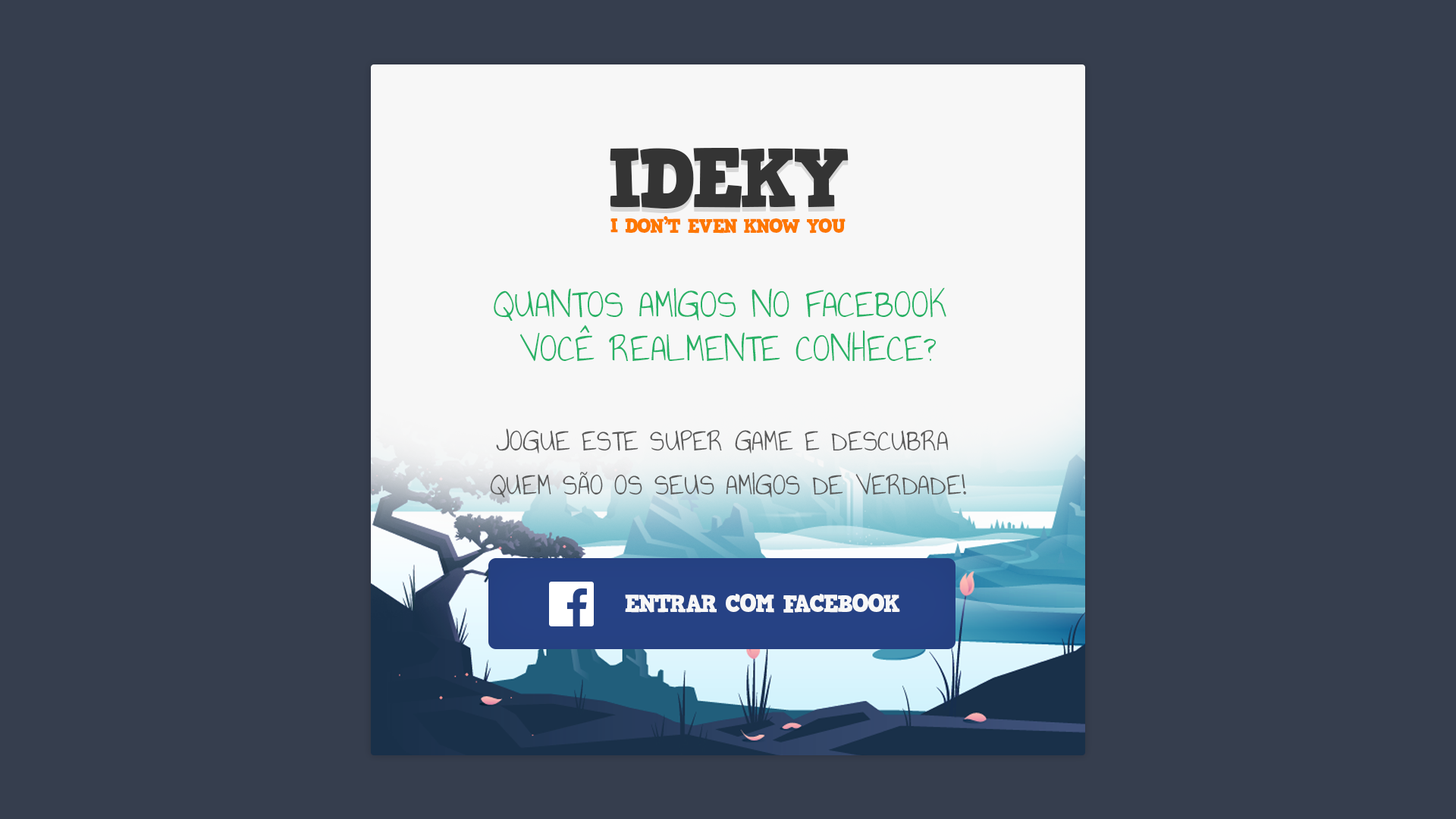
<style>
.page{position:relative;width:1456px;height:819px;background:#363e4e}
.page>*{position:absolute;margin:0}
.t1{font:83.2px "HVDComicSerifPro";letter-spacing:-0.06em;color:#343434;text-transform:uppercase}
.t2{font:19.5px "HVDComicSerifPro";letter-spacing:-0.06em;color:#fd7700;text-transform:uppercase}
.t3{font:30.8px/44.5px "AnnieUseYourTelescope";color:#585858;text-transform:uppercase}
.t4{font:40.5px/44.5px "AnnieUseYourTelescope";color:#28b266;text-transform:uppercase}
.t5{font:24.3px "HVDComicSerifPro";letter-spacing:-0.06em;color:#f7f7f7;text-transform:uppercase}
</style>
<div class="page">
<p class="t1" style="left:610px;top:148px;width:239px;height:61px">ideky</p>
<p class="t2" style="left:610px;top:216px;width:236px;height:18px">I don’t even know you</p>
<p class="t3" style="left:490px;top:287px;width:476px;height:210px;text-align:center"><span class="t4">Quantos amigos no facebook <br>você realmente Conhece?<br></span><br>Jogue este super game e descubra <br>quem são os seus amigos de verdade!</p>
<p class="t5" style="left:625px;top:594px;width:275px;height:19px">ENTRAR COM FACEBOOK</p>
</div>
